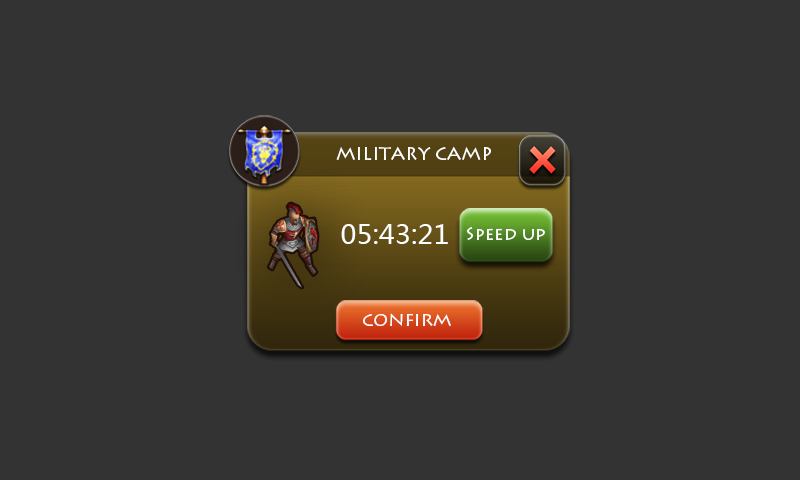
<style>
.page{position:relative;width:800px;height:480px;background:#333333}
.page>*{position:absolute;margin:0}
.t1{font:18px "LithosPro-Regular";color:#ffffff}
.t2{font:27.2px "MicrosoftYaHei";color:#ffffff}
.t3{font:20px "LithosPro-Regular";color:#ffffff}
</style>
<div class="page">
<p class="t1" style="left:336px;top:146px;width:155px;height:14px">MILITARY CAMP</p>
<p class="t2" style="left:341px;top:224px;width:107px;height:20px">05:43:21</p>
<p class="t1" style="left:467px;top:227px;width:78px;height:13px">Speed up</p>
<p class="t3" style="left:363px;top:313px;width:88px;height:13px">confirm</p>
</div>
